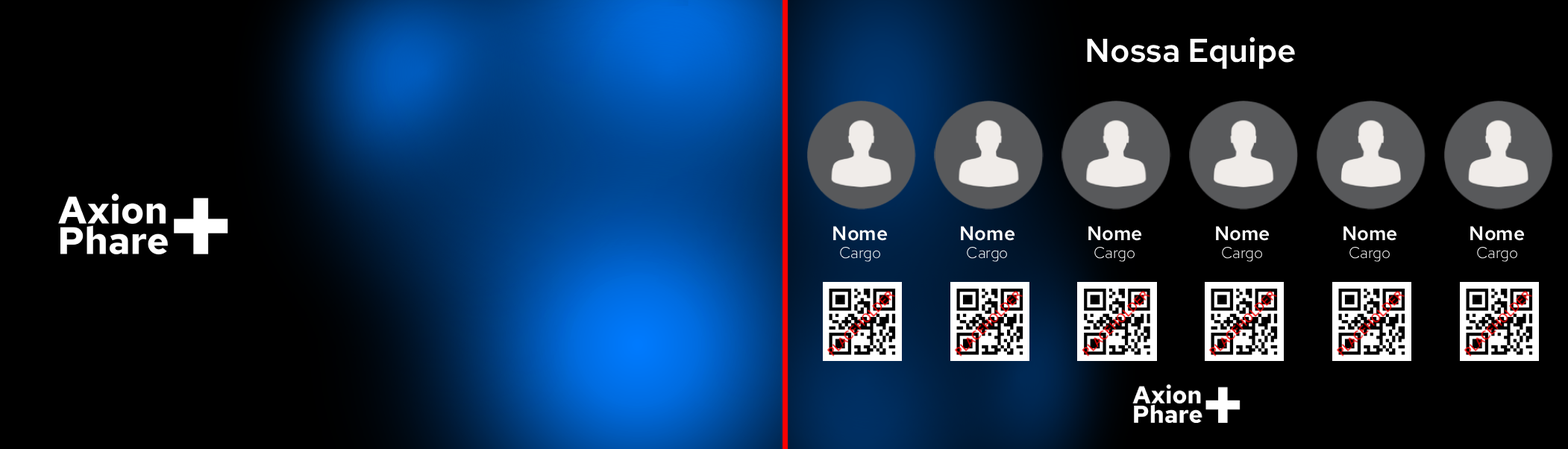
<style>
.page{position:relative;width:1568px;height:449px;background:#000000}
.page>*{position:absolute;margin:0}
.t1{font:32.9px "RedHatText-SemiBold";color:#ffffff}
.t2{font:19.7px "RedHatText-SemiBold";color:#ffffff}
.t3{font:15.7px "RedHatText-Light";color:#ffffff}
</style>
<div class="page">
<p class="t1" style="left:1087px;top:37px;width:208px;height:32px">Nossa Equipe</p>
<p class="t2" style="left:833px;top:226px;width:55px;height:15px">Nome</p>
<p class="t2" style="left:961px;top:226px;width:54px;height:15px">Nome</p>
<p class="t2" style="left:1088px;top:226px;width:54px;height:15px">Nome</p>
<p class="t2" style="left:1216px;top:226px;width:54px;height:15px">Nome</p>
<p class="t2" style="left:1343px;top:226px;width:54px;height:15px">Nome</p>
<p class="t2" style="left:1470px;top:226px;width:55px;height:15px">Nome</p>
<p class="t3" style="left:840px;top:247px;width:40px;height:15px">Cargo</p>
<p class="t3" style="left:967px;top:247px;width:40px;height:15px">Cargo</p>
<p class="t3" style="left:1094px;top:247px;width:41px;height:15px">Cargo</p>
<p class="t3" style="left:1222px;top:247px;width:40px;height:15px">Cargo</p>
<p class="t3" style="left:1349px;top:247px;width:41px;height:15px">Cargo</p>
<p class="t3" style="left:1477px;top:247px;width:40px;height:15px">Cargo</p>
</div>
